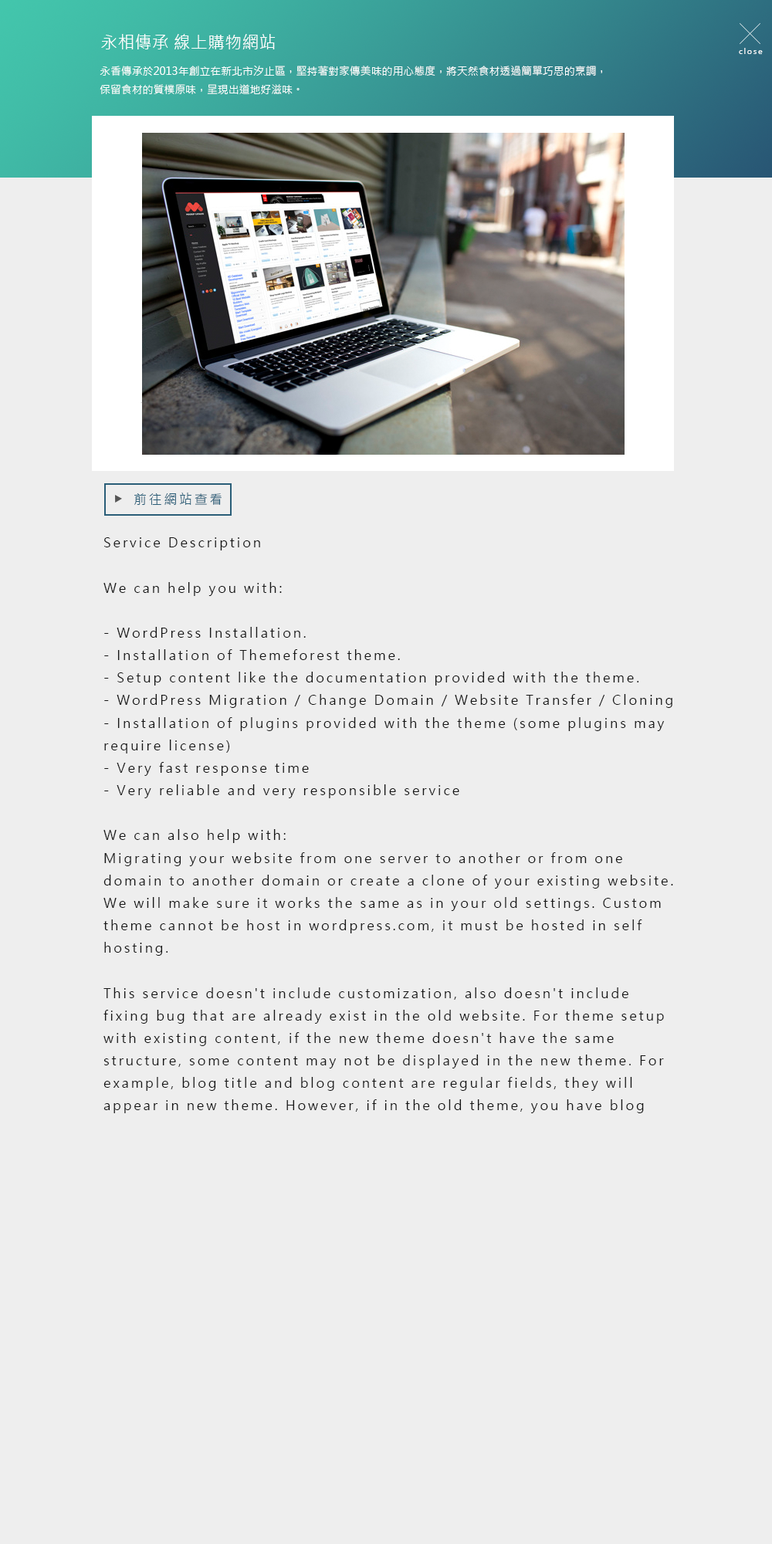
<style>
.page{position:relative;width:772px;height:1544px;background:#eeeeee}
.page>*{position:absolute;margin:0}
.t1{font:17.2px "MicrosoftJhengHeiRegular";color:#ffffff}
.t2{font:7.5px "MicrosoftJhengHeiRegular";letter-spacing:0.18em;color:#ffffff}
.t3{font:10.7px "MicrosoftJhengHeiRegular";color:#ffffff}
.t4{font:9.3px "MicrosoftJhengHeiRegular";letter-spacing:0.18em;color:#2a5e78}
.t5{font:9.3px "MicrosoftJhengHeiRegular";letter-spacing:0.18em;color:#161616}
</style>
<div class="page">
<p class="t1" style="left:101px;top:34px;width:175px;height:15px">永相傳承 線上購物網站</p>
<p class="t2" style="left:739px;top:48px;width:24px;height:6px">close</p>
<p class="t3" style="left:100px;top:66px;width:502px;height:28px">永香傳承於2013年創立在新北市汐止區，堅持著對家傳美味的用心態度，將天然食材透過簡單巧思的烹調，<br>保留食材的質樸原味，呈現出道地好滋味。</p>
<p class="t4" style="left:134px;top:493px;width:88px;height:12px">前往網站查看</p>
<p class="t5" style="left:103px;top:537px;width:570px;height:576px">Service Description<br><br>We can help you with:<br><br>- WordPress Installation. <br>- Installation of Themeforest theme. <br>- Setup content like the documentation provided with the theme. <br>- WordPress Migration / Change Domain / Website Transfer / Cloning <br>- Installation of plugins provided with the theme (some plugins may require license) <br>- Very fast response time <br>- Very reliable and very responsible service<br><br>We can also help with: <br>Migrating your website from one server to another or from one domain to another domain or create a clone of your existing website. We will make sure it works the same as in your old settings. Custom theme cannot be host in wordpress.com, it must be hosted in self hosting.<br><br>This service doesn't include customization, also doesn't include fixing bug that are already exist in the old website. For theme setup with existing content, if the new theme doesn't have the same structure, some content may not be displayed in the new theme. For example, blog title and blog content are regular fields, they will appear in new theme. However, if in the old theme, you have blog address or blog location - these are not common fields, hence they may not appear in the new theme (further customization is required which is outside project scope of theme setup). It also doesn't include replacing/re-arranging demo content with your real content. If you want to keep existing content, we recommend to setup in staging website first. That way your live website is not affected during development. <br>If you need both migration and also wordpress theme setup, please make 2 separate orders. For migration, it doesn't include setting up email after migration. Make sure to consult with your hosting support for moving email server. For multilanguage support, refer to: https://studio.envato.com/explore/wordpress-plug-ins/45230. <br>WHMCS is a separate installation service.<br><br>Check out all our reviews at: https://studio.envato.com/users/superhero/reviews<br><br>Please note, any details that are not specifically mention in the initial brief (for example hidden layers in PSD) will be excluded from project scope and will be considered as separate project after initial project is completed. After we deliver the final result, if there are changes done not by our team yet causing error or bug, additional charge may apply to fix it.<br><br>Extras<br><br><br>SEO Setup by Installing a SEO plugin<br>$20<br><br>Performance Setup by installing a cache plugin<br>$20<br><br>Security Setup by installing a security plugin<br>$20<br><br>Install on staging site before moving to live site<br>$50<br><br>Setup WPML for multilanguage<br>$100<br>Briefing Details<br><br>We would need: <br>- Your website URL. <br>- WordPress Theme files, demo files and Theme documentation (you can get from download section in themeforest.net). <br>- URL of the demo to be installed (choose one if there are several versions of demo) <br>- WordPress admin login details (if wordpress already installed). <br>- FTP login details <br>- Database access (or PHPmyadmin or cpanel access). <br>- Themeforest purchase code<br><br>Kindly provide the necessary details as much as possible to help speeding up the development process.<br><br>If you like our work, please tag us by clicking on the 'heart' icon on the right sidebar of this page so you can find us easily on your favorite list menu.</p>
</div>
